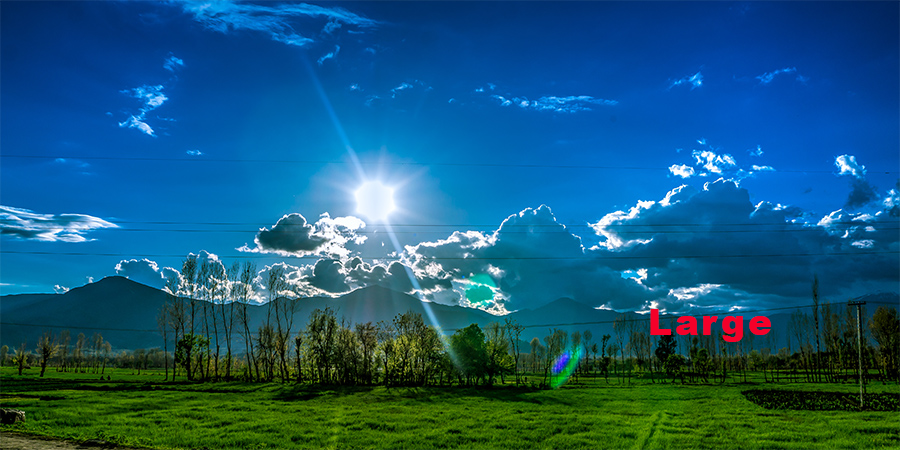
<style>
.page{position:relative;width:900px;height:450px}
.page>*{position:absolute;margin:0}
.t1{font:36px "Arial-Black";letter-spacing:0.075em;color:#f40029}
</style>
<div class="page">
<p class="t1" style="left:650px;top:309px;width:121px;height:33px">Large</p>
</div>
